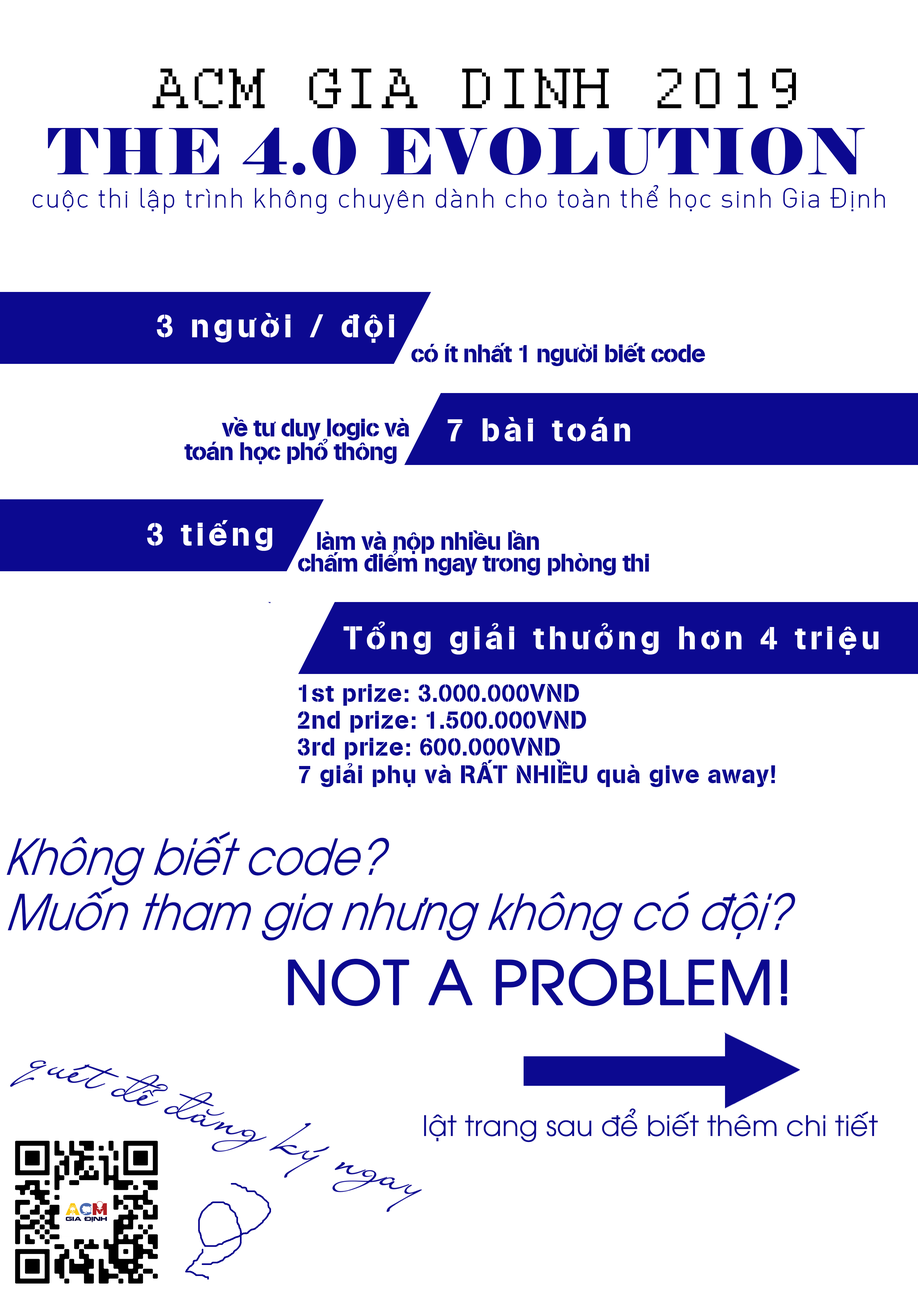
<style>
.page{position:relative;width:918px;height:1299px;background:#ffffff}
.page>*{position:absolute;margin:0}
.t1{font:63.5px "Courier";letter-spacing:0.04em;color:#000000}
.t2{font:63.5px "Elephant-Regular";letter-spacing:0.04em;color:#0c0990}
.t3{font:27.5px "SFUDINLight";letter-spacing:0.02em;color:#0c0990}
.t4{font:31.7px "SFUAGBuchStencilBQMedium";letter-spacing:0.12em;color:#ffffff}
.t5{font:24.3px "SFUAGBuchStencilBQMedium";letter-spacing:-0.04em;color:#0c0990}
.t6{font:24.3px/23.6px "SFUAGBuchStencilBQMedium";letter-spacing:-0.04em;color:#0c0990}
.t7{font:24.3px/21.7px "SFUAGBuchStencilBQMedium";letter-spacing:-0.04em;color:#0c0990}
.t8{font:24.3px/26.8px "SFUAGBuchStencilBQMedium";letter-spacing:0.02em;color:#0c0990}
.t9{font:24.3px "SFUAGBuchStencilBQMedium";letter-spacing:0.02em;color:#0c0990}
.t10{font:51.9px "UTM-Avo";color:#0c0990;scale:0.83 1}
.t11{font:59.6px "UTM-Avo";color:#0c0990;font-weight:bold}
.t12{font:28.2px "UTM-Avo";color:#0c0990}
</style>
<div class="page">
<p class="t1" style="left:153px;top:68px;width:643px;height:40px">ACM GIA DINH 2019</p>
<p class="t2" style="left:48px;top:127px;width:817px;height:48px">THE 4.0 EVOLUTION</p>
<p class="t3" style="left:32px;top:185px;width:853px;height:29px">cuộc thi lập trình không chuyên dành cho toàn thể học sinh Gia Định</p>
<p class="t4" style="left:157px;top:313px;width:237px;height:30px">3 người / đội</p>
<p class="t5" style="left:411px;top:343px;width:294px;height:23px">có ít nhất 1 người biết code</p>
<p class="t6" style="left:184px;top:417px;width:225px;height:47px;text-align:right">về tư duy logic và<br>toán học phổ thông</p>
<p class="t4" style="left:448px;top:417px;width:182px;height:24px">7 bài toán</p>
<p class="t4" style="left:147px;top:520px;width:125px;height:31px">3 tiếng</p>
<p class="t7" style="left:298px;top:530px;width:351px;height:45px">làm và nộp nhiều lần<br>chấm điểm ngay trong phòng thi</p>
<p class="t4" style="left:344px;top:621px;width:535px;height:34px">Tổng giải thưởng hơn 4 triệu</p>
<p class="t8" style="left:298px;top:684px;width:288px;height:75px">1st prize: 3.000.000VND<br>2nd prize: 1.500.000VND<br>3rd prize: 600.000VND</p>
<p class="t9" style="left:299px;top:759px;width:476px;height:28px">7 giải phụ và RẤT NHIỀU quà give away!</p>
<p class="t10" style="left:6px;top:831px;width:383px;height:54px">Không biết code?</p>
<p class="t10" style="left:8px;top:886px;width:788px;height:54px">Muốn tham gia nhưng không có đội?</p>
<p class="t11" style="left:288px;top:958px;width:499px;height:48px">NOT A PROBLEM!</p>
<p class="t12" style="left:424px;top:1108px;width:454px;height:34px">lật trang sau để biết thêm chi tiết</p>
</div>
